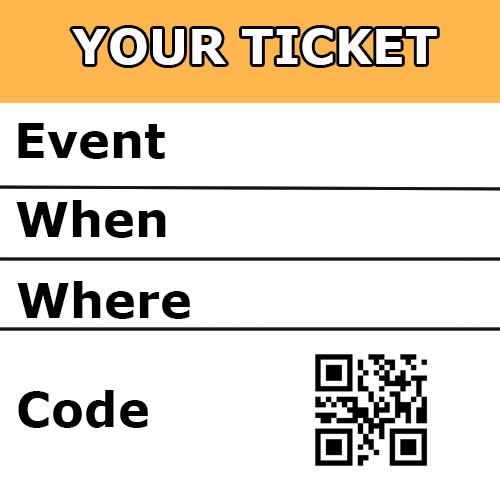
<style>
.page{position:relative;width:500px;height:500px;background:#ffffff}
.page>*{position:absolute;margin:0}
.t1{font:48px "Verdana-Bold";color:#ffffff}
.t2{font:48px "Verdana-Bold";color:#000000}
</style>
<div class="page">
<p class="t1" style="left:72px;top:28px;width:365px;height:37px">YOUR TICKET</p>
<p class="t2" style="left:18px;top:123px;width:147px;height:36px">Event</p>
<p class="t2" style="left:16px;top:200px;width:150px;height:38px">When</p>
<p class="t2" style="left:17px;top:281px;width:173px;height:38px">Where</p>
<p class="t2" style="left:18px;top:390px;width:130px;height:38px">Code</p>
</div>
